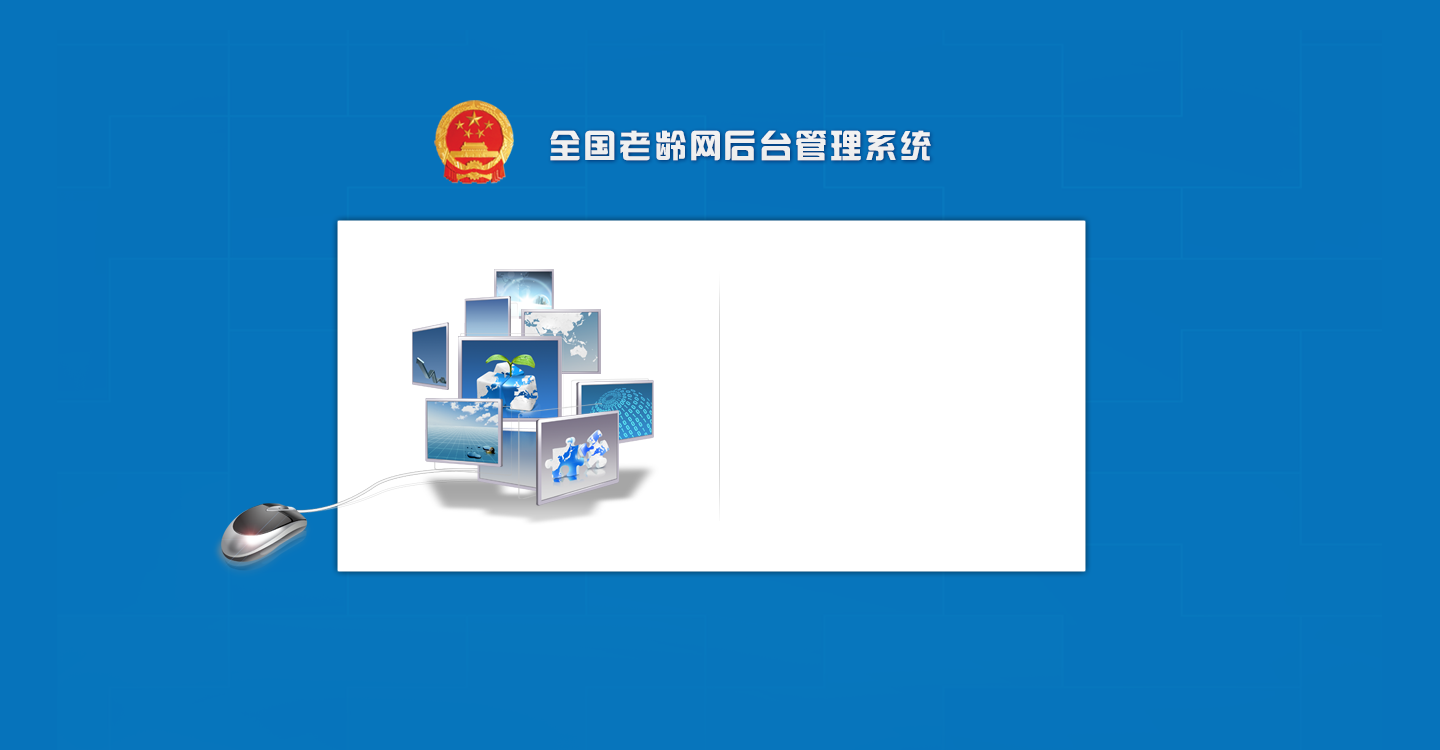
<style>
.page{position:relative;width:1440px;height:750px;background:#0673bb}
.page>*{position:absolute;margin:0}
.t1{font:32px "¹ã½Ý¾ÓÃÔÄã×Ö¿â";letter-spacing:0.1em;color:#ffffff}
</style>
<div class="page">
<p class="t1" style="left:550px;top:130px;width:381px;height:31px">全国老龄网后台管理系统</p>
</div>
